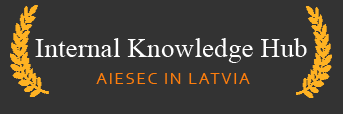
<style>
.page{position:relative;width:343px;height:114px;background:#333333}
.page>*{position:absolute;margin:0}
.t1{font:27.4px "TimesNewRomanPSMT";color:#ffffff}
.t2{font:17.4px "Corbel";letter-spacing:0.08em;color:#fe7e0d}
</style>
<div class="page">
<p class="t1" style="left:35px;top:38px;width:272px;height:25px">Internal Knowledge Hub</p>
<p class="t2" style="left:96px;top:73px;width:154px;height:11px">AIESEC IN LATVIA</p>
</div>
